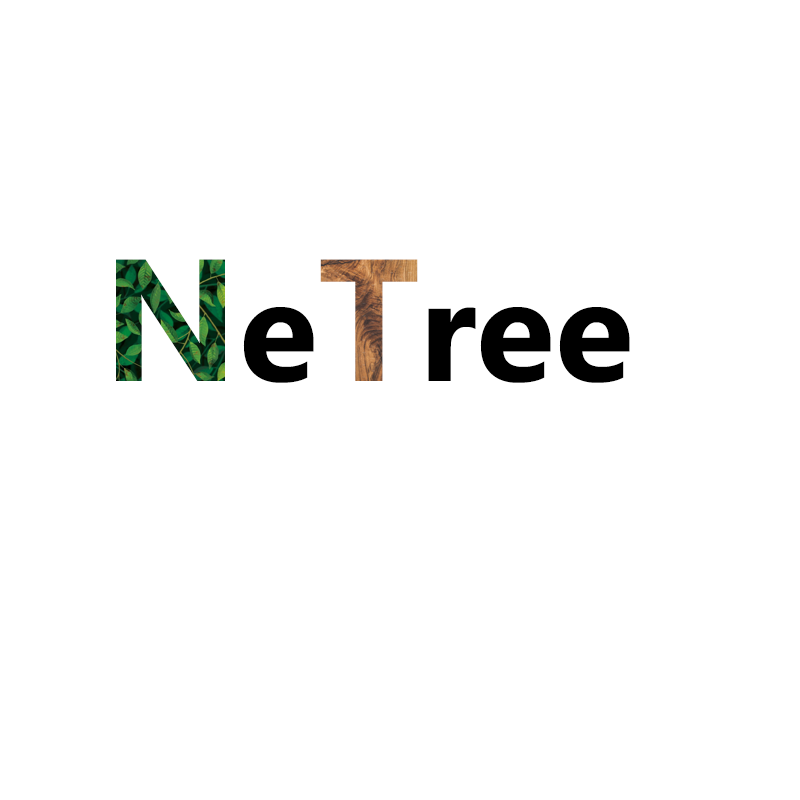
<style>
.page{position:relative;width:800px;height:800px;background:#ffffff}
.page>*{position:absolute;margin:0}
.t1{font:144.6px "LeelawadeeUI-Bold"}
.t2{font:173.5px "LeelawadeeUI-Bold"}
</style>
<div class="page">
<p class="t1" style="left:116px;top:259px;width:514px;height:124px"><span class="t2">N</span>e<span class="t2">T</span>ree</p>
</div>
